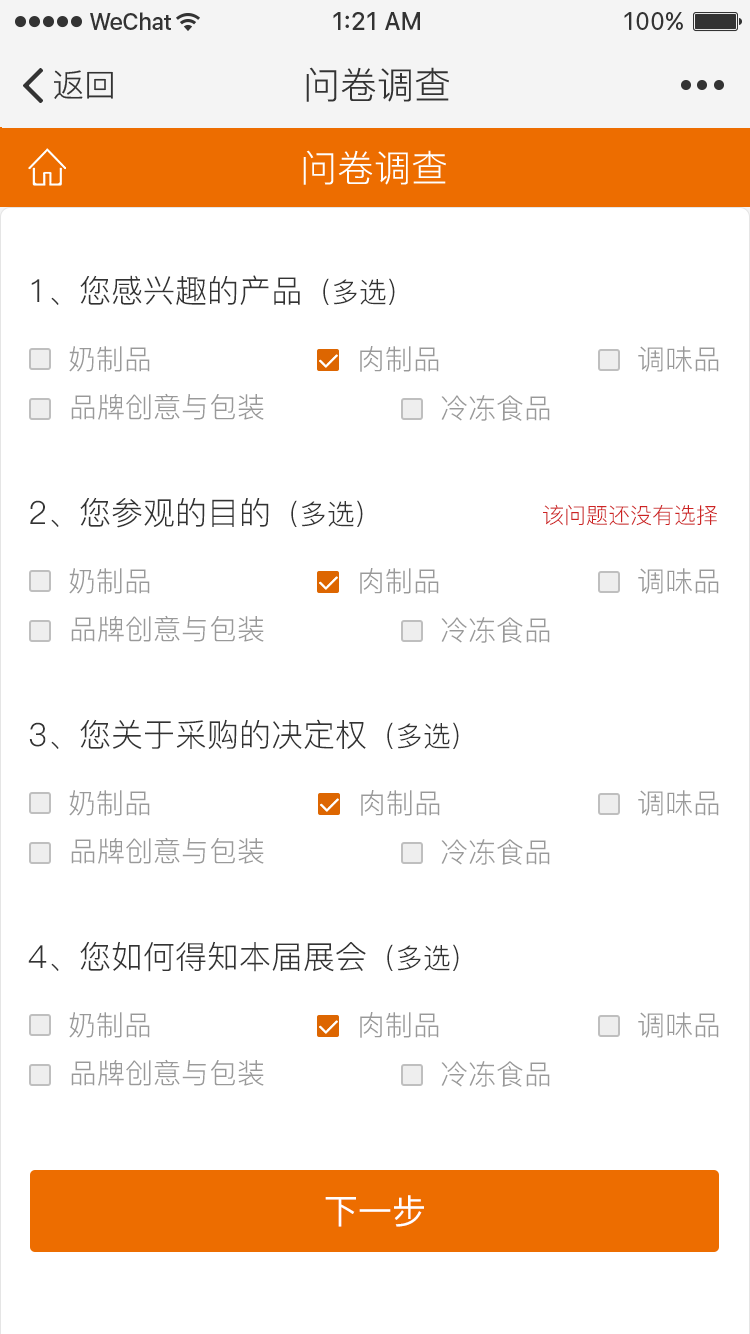
<style>
.page{position:relative;width:750px;height:1334px;background:#ffffff}
.page>*{position:absolute;margin:0}
.t1{font:32px "PingFang-SC-Regular";color:#333333}
.t2{font:37px "PingFang-SC-Regular";color:#333333}
.t3{font:37px "PingFang-SC-Regular";color:#ffffff}
.t4{font:32px "PingFang-SC-Regular";color:#333333;text-transform:uppercase}
.t5{font:28px "PingFang-SC-Regular";color:#333333;text-transform:uppercase}
.t6{font:28px "PingFang-SC-Regular";color:#999999;text-transform:uppercase}
.t7{font:22px "PingFang-SC-Regular";color:#ce2323;text-transform:uppercase}
.t8{font:34px "PingFang-SC-Medium";color:#ffffff;text-transform:uppercase}
</style>
<div class="page">
<p class="t1" style="left:54px;top:70px;width:59px;height:29px">返回</p>
<p class="t2" style="left:306px;top:67px;width:143px;height:35px">问卷调查</p>
<p class="t3" style="left:303px;top:150px;width:143px;height:35px">问卷调查</p>
<p class="t4" style="left:31px;top:275px;width:364px;height:31px">1、您感兴趣的产品<span class="t5">（多选)</span></p>
<p class="t6" style="left:69px;top:346px;width:81px;height:26px">奶制品</p>
<p class="t6" style="left:360px;top:346px;width:79px;height:26px">肉制品</p>
<p class="t6" style="left:638px;top:346px;width:81px;height:26px">调味品</p>
<p class="t6" style="left:71px;top:393px;width:193px;height:27px">品牌创意与包装</p>
<p class="t6" style="left:441px;top:395px;width:109px;height:26px">冷冻食品</p>
<p class="t4" style="left:30px;top:497px;width:333px;height:31px">2、您参观的目的<span class="t5">（多选)</span></p>
<p class="t7" style="left:543px;top:504px;width:174px;height:22px">该问题还没有选择</p>
<p class="t6" style="left:69px;top:568px;width:81px;height:26px">奶制品</p>
<p class="t6" style="left:360px;top:568px;width:79px;height:26px">肉制品</p>
<p class="t6" style="left:638px;top:568px;width:81px;height:26px">调味品</p>
<p class="t6" style="left:71px;top:615px;width:193px;height:27px">品牌创意与包装</p>
<p class="t6" style="left:441px;top:617px;width:109px;height:26px">冷冻食品</p>
<p class="t4" style="left:29px;top:719px;width:430px;height:30px">3、您关于采购的决定权<span class="t5">（多选)</span></p>
<p class="t6" style="left:69px;top:790px;width:81px;height:26px">奶制品</p>
<p class="t6" style="left:361px;top:790px;width:79px;height:26px">肉制品</p>
<p class="t6" style="left:638px;top:790px;width:81px;height:26px">调味品</p>
<p class="t6" style="left:71px;top:837px;width:193px;height:27px">品牌创意与包装</p>
<p class="t6" style="left:441px;top:839px;width:109px;height:26px">冷冻食品</p>
<p class="t4" style="left:28px;top:941px;width:431px;height:31px">4、您如何得知本届展会<span class="t5">（多选)</span></p>
<p class="t6" style="left:69px;top:1012px;width:81px;height:26px">奶制品</p>
<p class="t6" style="left:360px;top:1012px;width:79px;height:26px">肉制品</p>
<p class="t6" style="left:638px;top:1012px;width:81px;height:26px">调味品</p>
<p class="t6" style="left:71px;top:1059px;width:193px;height:27px">品牌创意与包装</p>
<p class="t6" style="left:441px;top:1061px;width:109px;height:26px">冷冻食品</p>
<p class="t8" style="left:325px;top:1195px;width:99px;height:32px">下一步</p>
</div>
